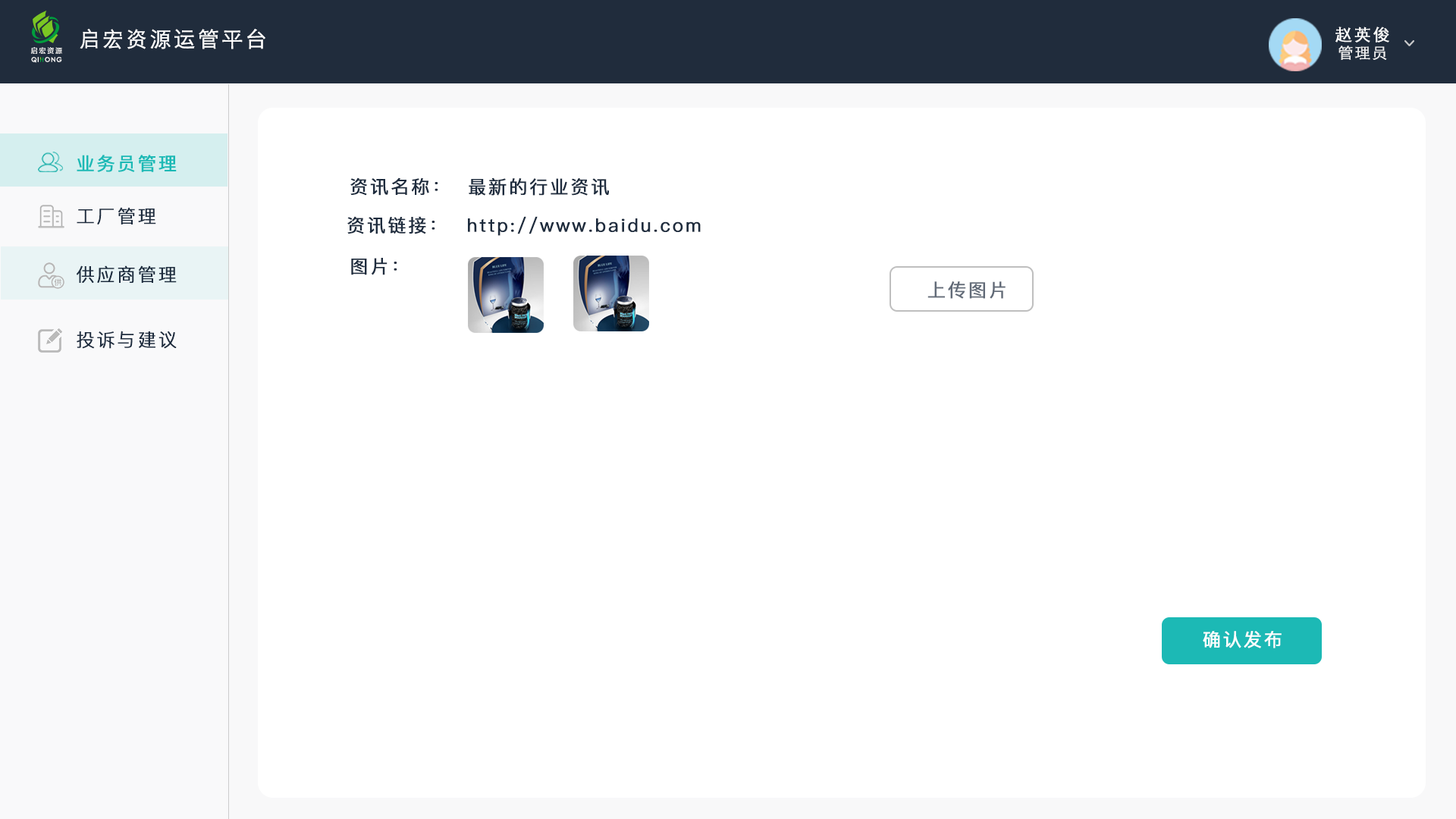
<style>
.page{position:relative;width:1456px;height:819px;background:#ffffff}
.page>*{position:absolute;margin:0}
.t1{font:21.2px "STHeitiSC-Light";letter-spacing:0.1em;color:#ffffff;font-weight:bold}
.t2{font:16.7px "STHeitiSC-Light";letter-spacing:0.1em;color:#ffffff;font-weight:bold}
.t3{font:7px "FZLTZHK--GBK1-0";letter-spacing:0.18em;color:#ffffff}
.t4{font:15.2px "STHeitiSC-Light";letter-spacing:0.1em;color:#ffffff;font-weight:bold}
.t5{font:6.3px "CenturyGothic";letter-spacing:0.1em;color:#ffffff;font-weight:bold}
.t6{font:18.2px "PingFangSC-Regular";letter-spacing:0.1em;color:#1cb9b5;font-weight:bold}
.t7{font:18.2px "PingFangSC-Regular";letter-spacing:0.1em;color:#1e2c3e;font-weight:bold}
.t8{font:18.2px "PingFangSC-Light";letter-spacing:0.1em;color:#1e2c3e;font-weight:bold}
.t9{font:18.2px "PingFangSC-Regular";letter-spacing:0.1em;color:#626b78;font-weight:bold}
.t10{font:18.2px "PingFangSC-Regular";letter-spacing:0.1em;color:#ffffff;font-weight:bold}
</style>
<div class="page">
<p class="t1" style="left:80px;top:29px;width:185px;height:20px">启宏资源运管平台</p>
<p class="t2" style="left:1335px;top:27px;width:54px;height:15px">赵英俊</p>
<p class="t3" style="left:31px;top:47px;width:31px;height:7px">启宏资源</p>
<p class="t4" style="left:1338px;top:45px;width:49px;height:15px;opacity:0.9">管理员</p>
<p class="t5" style="left:31px;top:57px;width:31px;height:6px">QI  ONG</p>
<p class="t6" style="left:77px;top:155px;width:100px;height:17px">业务员管理</p>
<p class="t7" style="left:350px;top:177px;width:88px;height:19px">资讯名称：</p>
<p class="t7" style="left:469px;top:177px;width:140px;height:19px">最新的行业资讯</p>
<p class="t8" style="left:77px;top:207px;width:79px;height:17px">工厂管理</p>
<p class="t7" style="left:347px;top:216px;width:88px;height:18px">资讯链接：</p>
<p class="t7" style="left:468px;top:216px;width:233px;height:20px">http://www.baidu.com</p>
<p class="t7" style="left:351px;top:258px;width:46px;height:17px">图片：</p>
<p class="t8" style="left:77px;top:265px;width:100px;height:18px">供应商管理</p>
<p class="t9" style="left:927px;top:281px;width:79px;height:18px">上传图片</p>
<p class="t8" style="left:77px;top:331px;width:100px;height:18px">投诉与建议</p>
<p class="t10" style="left:1203px;top:631px;width:79px;height:17px">确认发布</p>
</div>
